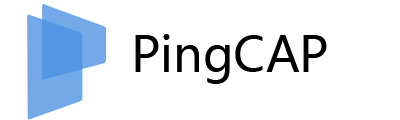
<style>
.page{position:relative;width:400px;height:120px;background:#ffffff}
.page>*{position:absolute;margin:0}
.t1{font:48px "MicrosoftYaHei";color:#000000}
</style>
<div class="page">
<p class="t1" style="left:135px;top:34px;width:192px;height:50px">PingCAP</p>
</div>
